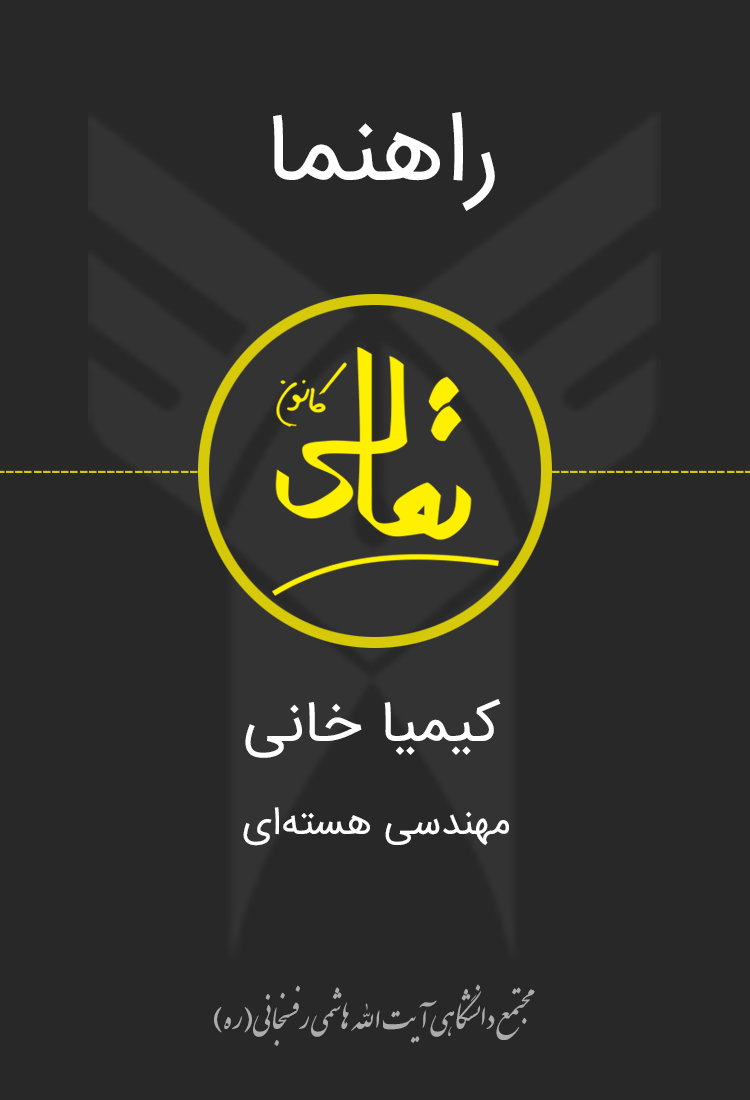
<style>
.page{position:relative;width:750px;height:1100px;background:#282828}
.page>*{position:absolute;margin:0}
.t1{font:88.2px "IRANSans";color:#ffffff}
.t2{font:52.7px "IRANSans";color:#ffffff}
.t3{font:34.7px "IRANSans";color:#ffffff}
.t4{font:31.7px "IranNastaliq";color:#acacac}
</style>
<div class="page">
<p class="t1" style="left:273px;top:112px;width:222px;height:99px">راهنما</p>
<p class="t2" style="left:245px;top:699px;width:256px;height:59px">کیمیا خانی</p>
<p class="t3" style="left:243px;top:807px;width:266px;height:39px">مهندسی هسته‌ای</p>
<p class="t4" style="left:214px;top:984px;width:321px;height:62px">مجتمع دانشگاهی آیت‌الله هاشمی رفسنجانی‌(ره)</p>
</div>
